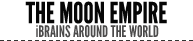
<style>
.page{position:relative;width:193px;height:41px;background:#ffffff}
.page>*{position:absolute;margin:0}
.t1{font:28.8px "LeagueGothic";color:#060606}
.t2{font:15.8px "LeagueGothic";color:#4c4b4b}
</style>
<div class="page">
<p class="t1" style="left:25px;top:1px;width:142px;height:23px">THE MOON EMPIRE</p>
<p class="t2" style="left:36px;top:25px;width:123px;height:13px">iBRAINS AROUND THE WORLD</p>
</div>
